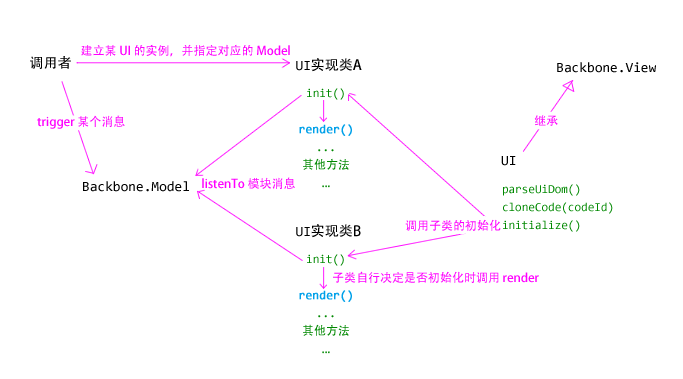
<style>
.page{position:relative;width:683px;height:379px;background:#ffffff}
.page>*{position:absolute;margin:0}
.t1{font:12px "AdobeHeitiStd-Regular";color:#ff00ff}
.t2{font:14px "AdobeHeitiStd-Regular";color:#000000}
.t3{font:14px "Consolas";color:#000000}
.t4{font:12px/18px "Consolas";color:#00a0e9;font-weight:bold}
.t5{font:12px/18px "Consolas";color:#008800}
.t6{font:12px/18px "AdobeHeitiStd-Regular";color:#008800}
</style>
<div class="page">
<p class="t1" style="left:81px;top:44px;width:209px;height:13px">建立某 UI 的实例，并指定对应的 Model</p>
<p class="t2" style="left:30px;top:56px;width:41px;height:13px">调用者</p>
<p class="t2" style="left:296px;top:58px;width:66px;height:14px"><span class="t3">UI</span>实现类A</p>
<p class="t3" style="left:557px;top:62px;width:99px;height:11px">Backbone.View</p>
<p class="t4" style="left:299px;top:88px;width:53px;height:100px;text-align:center"><span class="t5">init()<br><br></span>render()<br><span class="t5">...<br></span><span class="t6">其他方法<br>...</span></p>
<p class="t1" style="left:37px;top:115px;width:88px;height:14px">trigger 某个消息</p>
<p class="t1" style="left:534px;top:115px;width:24px;height:11px">继承</p>
<p class="t3" style="left:501px;top:156px;width:15px;height:10px">UI</p>
<p class="t3" style="left:83px;top:181px;width:106px;height:11px">Backbone.Model</p>
<p class="t1" style="left:202px;top:177px;width:93px;height:12px">listenTo 模块消息</p>
<p class="t5" style="left:503px;top:184px;width:110px;height:48px">parseUiDom()<br>cloneCode(codeId)<br>initialize()</p>
<p class="t1" style="left:405px;top:219px;width:96px;height:12px">调用子类的初始化</p>
<p class="t2" style="left:296px;top:224px;width:65px;height:14px"><span class="t3">UI</span>实现类B</p>
<p class="t4" style="left:299px;top:254px;width:53px;height:100px;text-align:center"><span class="t5">init()<br><br></span>render()<br><span class="t5">...<br></span><span class="t6">其他方法<br>...</span></p>
<p class="t1" style="left:333px;top:271px;width:206px;height:12px">子类自行决定是否初始化时调用 render</p>
</div>
